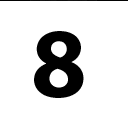
<style>
.page{position:relative;width:128px;height:128px;background:#ffffff}
.page>*{position:absolute;margin:0}
.t1{font:100px "MyriadHebrew-Bold";color:#000000}
</style>
<div class="page">
<p class="t1" style="left:34px;top:30px;width:50px;height:67px">8</p>
</div>
